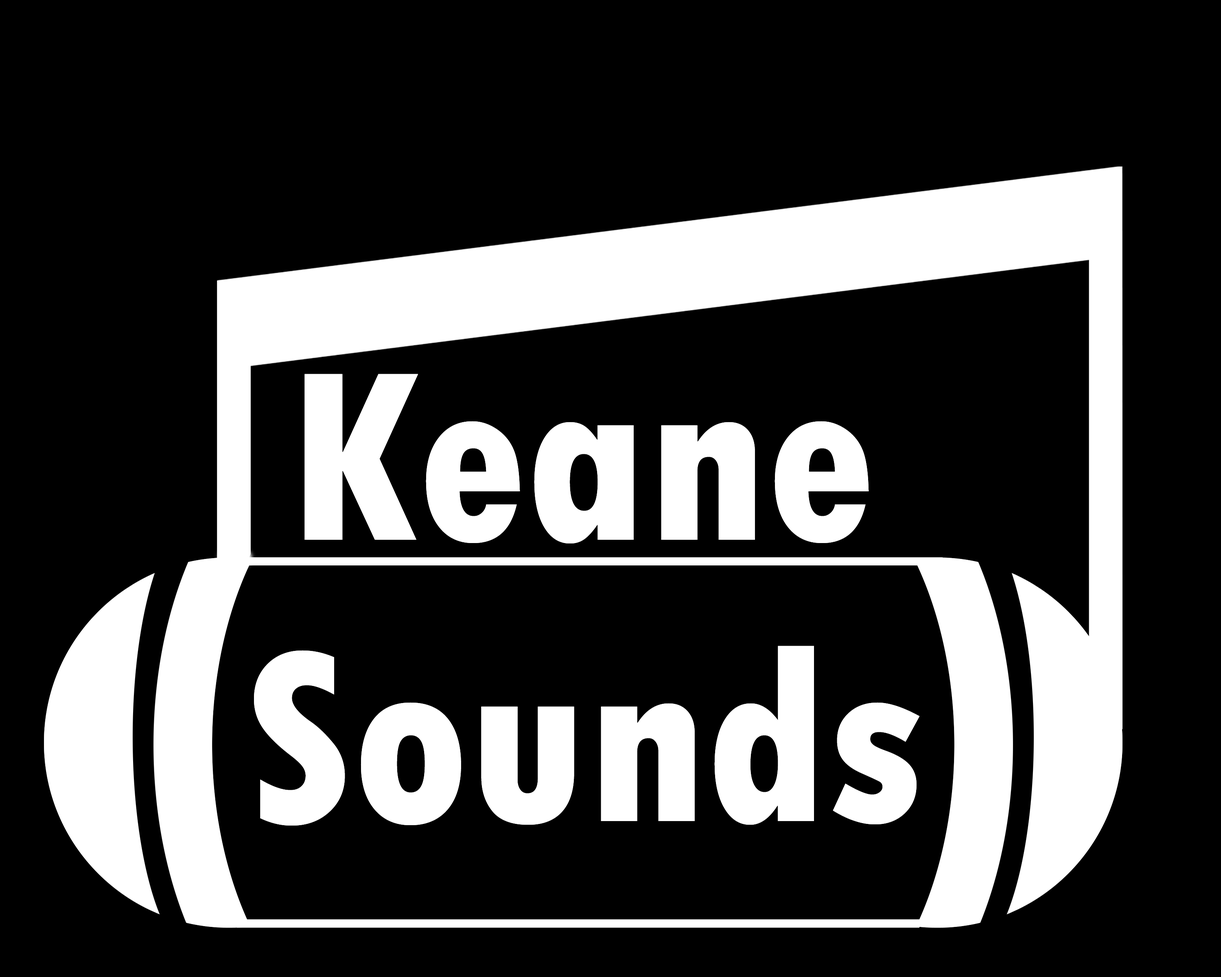
<style>
.page{position:relative;width:1221px;height:977px;background:#000000}
.page>*{position:absolute;margin:0}
.t1{font:254.3px "TwCenMT-CondensedExtraBold";color:#ffffff}
</style>
<div class="page">
<p class="t1" style="left:304px;top:374px;width:565px;height:169px">Keane</p>
<p class="t1" style="left:254px;top:645px;width:666px;height:180px">Sounds</p>
</div>
